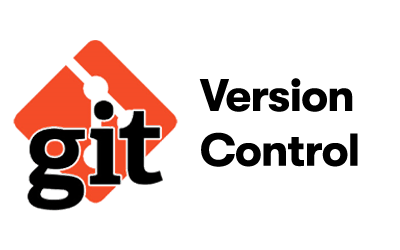
<style>
.page{position:relative;width:400px;height:250px;background:#ffffff}
.page>*{position:absolute;margin:0}
.t1{font:45.6px "GTWalsheim-Bold";letter-spacing:-0.02em;color:#000000}
</style>
<div class="page">
<p class="t1" style="left:199px;top:78px;width:159px;height:89px">Version<br>Control</p>
</div>
